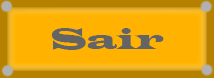
<style>
.page{position:relative;width:214px;height:78px;background:#ffb300}
.page>*{position:absolute;margin:0}
.t1{font:30px "LatinWide";color:#646464}
</style>
<div class="page">
<p class="t1" style="left:51px;top:28px;width:113px;height:22px">Sair</p>
</div>
